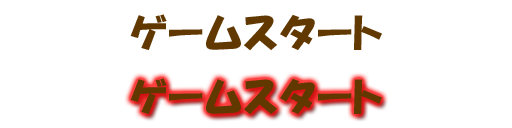
<style>
.page{position:relative;width:512px;height:128px;background:#ffffff}
.page>*{position:absolute;margin:0}
.t1{font:40px "HGPSoeiKakupoptai";letter-spacing:0.025em;color:#603800}
</style>
<div class="page">
<p class="t1" style="left:130px;top:14px;width:252px;height:37px">ゲームスタート</p>
<p class="t1" style="left:130px;top:78px;width:252px;height:37px">ゲームスタート</p>
</div>
